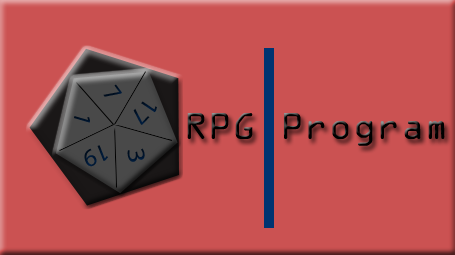
<style>
.page{position:relative;width:455px;height:255px;background:#cb5252}
.page>*{position:absolute;margin:0}
.t1{font:25.1px "MyriadPro-Regular";color:#000f21}
.t2{font:25px "MyriadPro-Regular";color:#001733;scale:1.06 1}
.t3{font:33.4px "OCRAStd"}
.t4{font:25px "MyriadPro-Regular";color:#001228;scale:0.9 1}
.t5{font:25.1px "MyriadPro-Regular";color:#001833}
.t6{font:25px "MyriadPro-Regular";color:#00152d;scale:1.22 1}
</style>
<div class="page">
<p class="t1" style="left:103px;top:84px;width:19px;height:13px;rotate:54deg">7</p>
<p class="t2" style="left:133px;top:101px;width:24px;height:24px;rotate:134deg">17</p>
<p class="t3" style="left:187px;top:113px;width:258px;height:33px">RPG Program</p>
<p class="t4" style="left:74px;top:116px;width:16px;height:7px;rotate:106deg">1</p>
<p class="t5" style="left:84px;top:145px;width:24px;height:22px;rotate:158deg">19</p>
<p class="t6" style="left:127px;top:148px;width:18px;height:14px;rotate:81deg">3</p>
</div>
